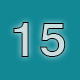
<style>
.page{position:relative;width:80px;height:80px;background:#128895}
.page>*{position:absolute;margin:0}
.t1{font:50px "Monospace821BT-Bold";color:#cadee0}
</style>
<div class="page">
<p class="t1" style="left:13px;top:22px;width:53px;height:35px">15</p>
</div>
